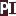
<style>
.page{position:relative;width:16px;height:16px;background:#ffffff}
.page>*{position:absolute;margin:0}
.t1{font:16.1px "Arial-Black";color:#ffffff;scale:0.78 1}
</style>
<div class="page">
<p class="t1" style="left:0px;top:1px;width:8px;height:13px">p</p>
</div>
